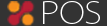
<style>
.page{position:relative;width:107px;height:26px;background:#333333}
.page>*{position:absolute;margin:0}
.t1{font:30.2px "KozGoPro-ExtraLight";color:#ffffff;scale:1.15 1}
</style>
<div class="page">
<p class="t1" style="left:43px;top:1px;width:57px;height:23px">POS</p>
</div>
